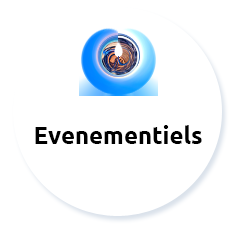
<style>
.page{position:relative;width:240px;height:225px;background:#ffffff}
.page>*{position:absolute;margin:0}
.t1{font:24px "Ubuntu-Bold";color:#000000}
</style>
<div class="page">
<p class="t1" style="left:35px;top:125px;width:167px;height:19px">Evenementiels</p>
</div>
